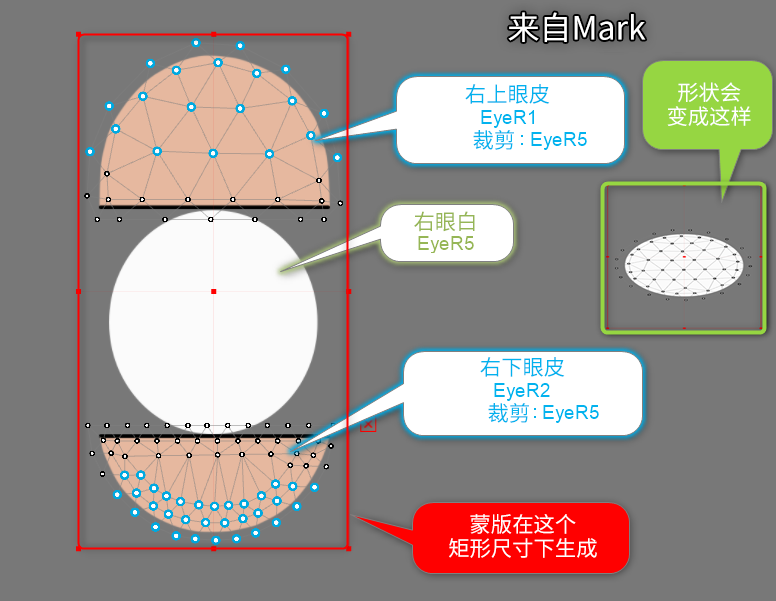
<style>
.page{position:relative;width:776px;height:601px;background:#787878}
.page>*{position:absolute;margin:0}
.t1{font:32px "SourceHanSansSC-Regular";color:#ffffff}
.t2{font:21.3px "SourceHanSansSC-Regular";color:#02b2ee}
.t3{font:21.3px/24px "SourceHanSansSC-Regular";color:#ffffff}
.t4{font:21.3px "SourceHanSansSC-Regular";color:#96b656}
</style>
<div class="page">
<p class="t1" style="left:508px;top:12px;width:138px;height:30px">来自Mark</p>
<p class="t2" style="left:465px;top:84px;width:85px;height:20px">右上眼皮</p>
<p class="t3" style="left:667px;top:82px;width:84px;height:44px;text-align:center">形状会<br>变成这样</p>
<p class="t2" style="left:473px;top:130px;width:41px;height:20px">裁剪</p>
<p class="t4" style="left:414px;top:211px;width:61px;height:21px">右眼白</p>
<p class="t2" style="left:480px;top:357px;width:85px;height:20px">右下眼皮</p>
<p class="t2" style="left:488px;top:403px;width:41px;height:20px">裁剪</p>
<p class="t3" style="left:449px;top:514px;width:148px;height:44px;text-align:center">蒙版在这个<br>矩形尺寸下生成</p>
</div>
